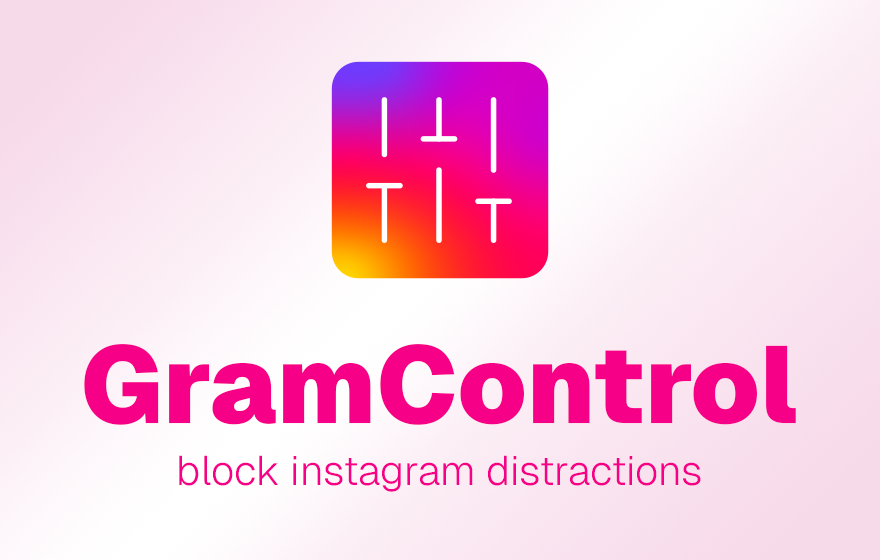
<style>
.page{position:relative;width:880px;height:560px}
.page>*{position:absolute;margin:0}
.t1{font:108.7px "Geist-Black";color:#f60087}
.t2{font:41.2px "Geist-Light";color:#f60087}
</style>
<div class="page">
<p class="t1" style="left:84px;top:344px;width:712px;height:81px">GramControl</p>
<p class="t2" style="left:179px;top:455px;width:522px;height:37px">block instagram distractions</p>
</div>
